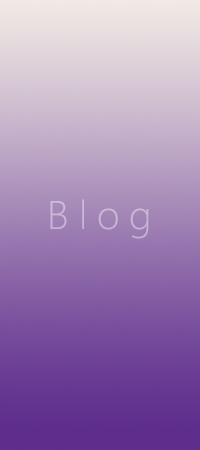
<style>
.page{position:relative;width:200px;height:450px}
.page>*{position:absolute;margin:0}
.t1{font:40px "SegoeUI-Light";letter-spacing:0.25em;color:#cab7d7}
</style>
<div class="page">
<p class="t1" style="left:50px;top:199px;width:99px;height:40px">Blog</p>
</div>
